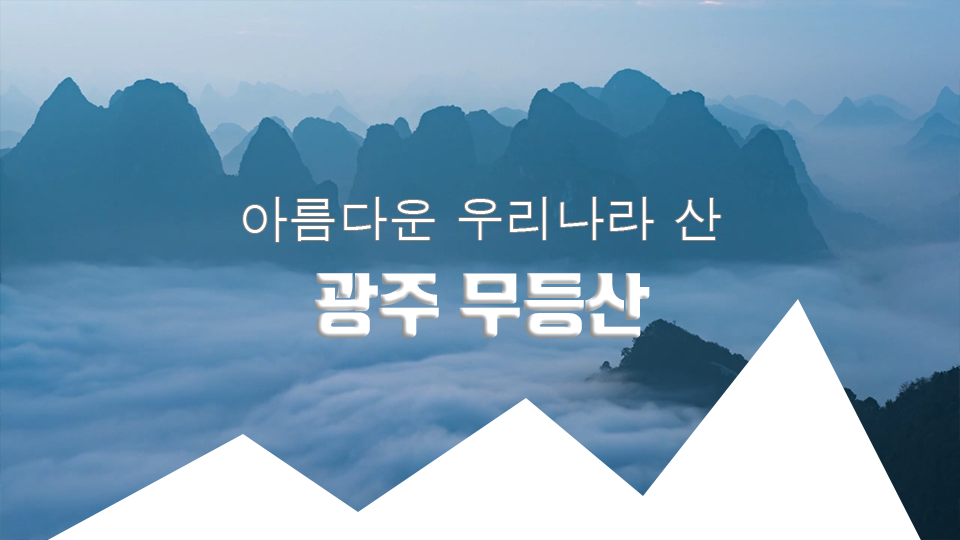
<style>
.page{position:relative;width:960px;height:540px}
.page>*{position:absolute;margin:0}
.t1{font:50px "Dotum";color:#ffffff}
.t2{font:70px "TmonMonsoriBlack";color:#ffffff}
</style>
<div class="page">
<p class="t1" style="left:243px;top:197px;width:478px;height:45px">아름다운 우리나라 산</p>
<p class="t2" style="left:315px;top:273px;width:335px;height:65px">광주 무등산</p>
</div>
